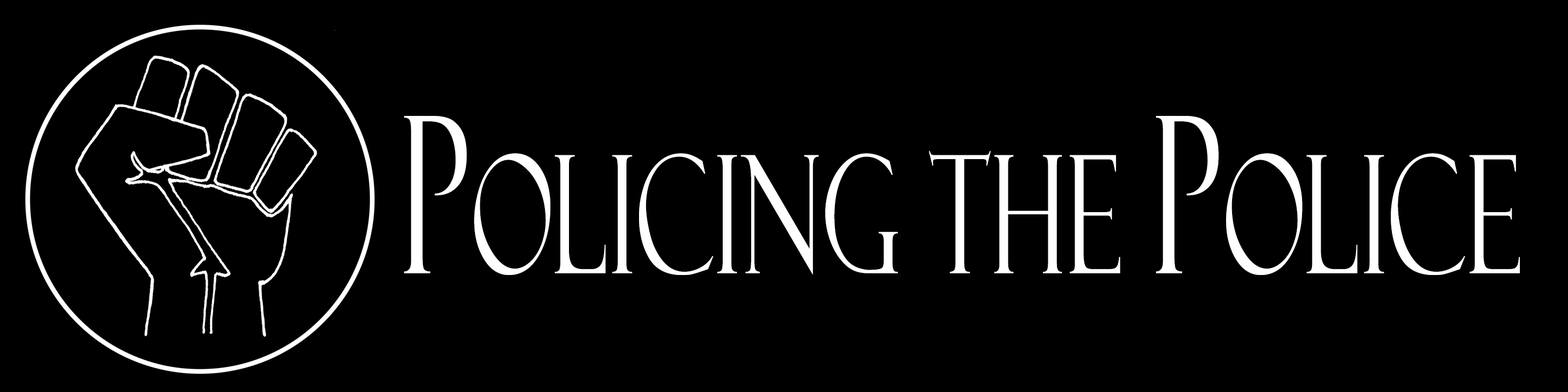
<style>
.page{position:relative;width:1568px;height:392px;background:#000000}
.page>*{position:absolute;margin:0}
.t1{font:164px "FelixTitlingMT";color:#ffffff;scale:0.62 1}
.t2{font:218.7px "FelixTitlingMT";color:#ffffff;scale:0.62 1}
</style>
<div class="page">
<p class="t1" style="left:404px;top:116px;width:1116px;height:159px"><span class="t2">P</span>olicing the <span class="t2">P</span>olice</p>
</div>
